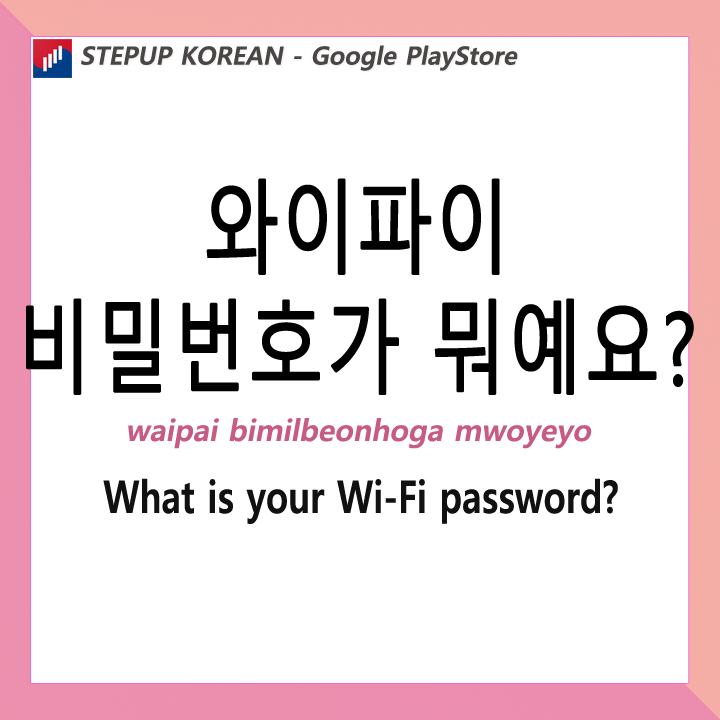
<style>
.page{position:relative;width:720px;height:720px;background:#ffffff}
.page>*{position:absolute;margin:0}
.t1{font:25px "MalgunGothicBold";color:#4a4646;font-style:italic}
.t2{font:100px "MalgunGothic";color:#000000;font-weight:bold;scale:0.75 1}
.t3{font:30px "MalgunGothicBold";color:#c75b84;font-style:italic}
.t4{font:45px "MalgunGothicBold";color:#111111;scale:0.8 1}
</style>
<div class="page">
<p class="t1" style="left:81px;top:45px;width:437px;height:26px">STEPUP KOREAN - Google PlayStore</p>
<p class="t2" style="left:26px;top:178px;width:668px;height:217px;text-align:center">와이파이<br>비밀번호가 뭐예요?</p>
<p class="t3" style="left:128px;top:418px;width:464px;height:31px">waipai bimilbeonhoga mwoyeyo</p>
<p class="t4" style="left:103px;top:478px;width:515px;height:46px">What is your Wi-Fi password?</p>
</div>
